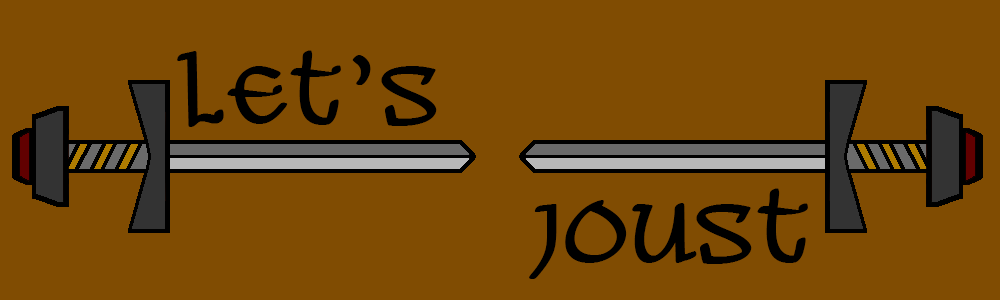
<style>
.page{position:relative;width:1000px;height:300px;background:#804c02}
.page>*{position:absolute;margin:0}
.t1{font:90px "AleandWenchesBB";color:#000000}
</style>
<div class="page">
<p class="t1" style="left:177px;top:50px;width:260px;height:77px">Let’s</p>
<p class="t1" style="left:529px;top:188px;width:279px;height:91px">Joust</p>
</div>
